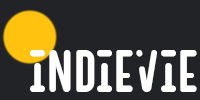
<style>
.page{position:relative;width:200px;height:100px;background:#222326}
.page>*{position:absolute;margin:0}
.t1{font:60px "Argio-Regular";color:#ffffff}
</style>
<div class="page">
<p class="t1" style="left:30px;top:50px;width:167px;height:42px">IndieVie</p>
</div>
